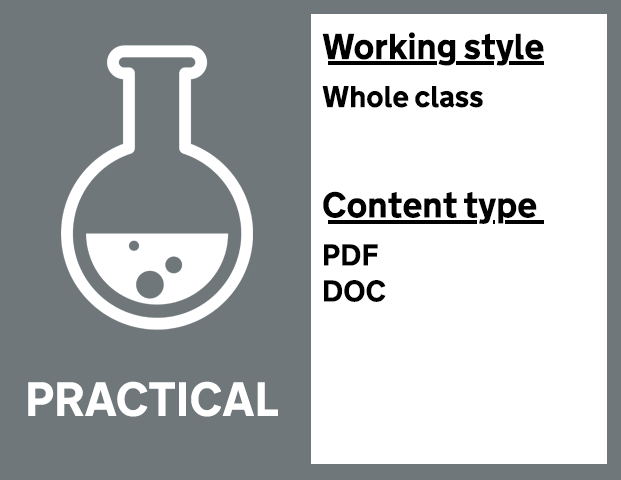
<style>
.page{position:relative;width:621px;height:480px;background:#ffffff}
.page>*{position:absolute;margin:0}
.t1{font:36px "NTA-Bold";color:#000000}
.t2{font:30px "NTA-Bold";color:#000000}
.t3{font:48px "NTA-Bold";color:#ffffff}
</style>
<div class="page">
<p class="t1" style="left:322px;top:32px;width:222px;height:270px">Working style<br><span class="t2">Whole class<br></span><br>Content type<br><span class="t2">PDF<br>DOC</span></p>
<p class="t3" style="left:28px;top:381px;width:250px;height:36px">PRACTICAL</p>
</div>
